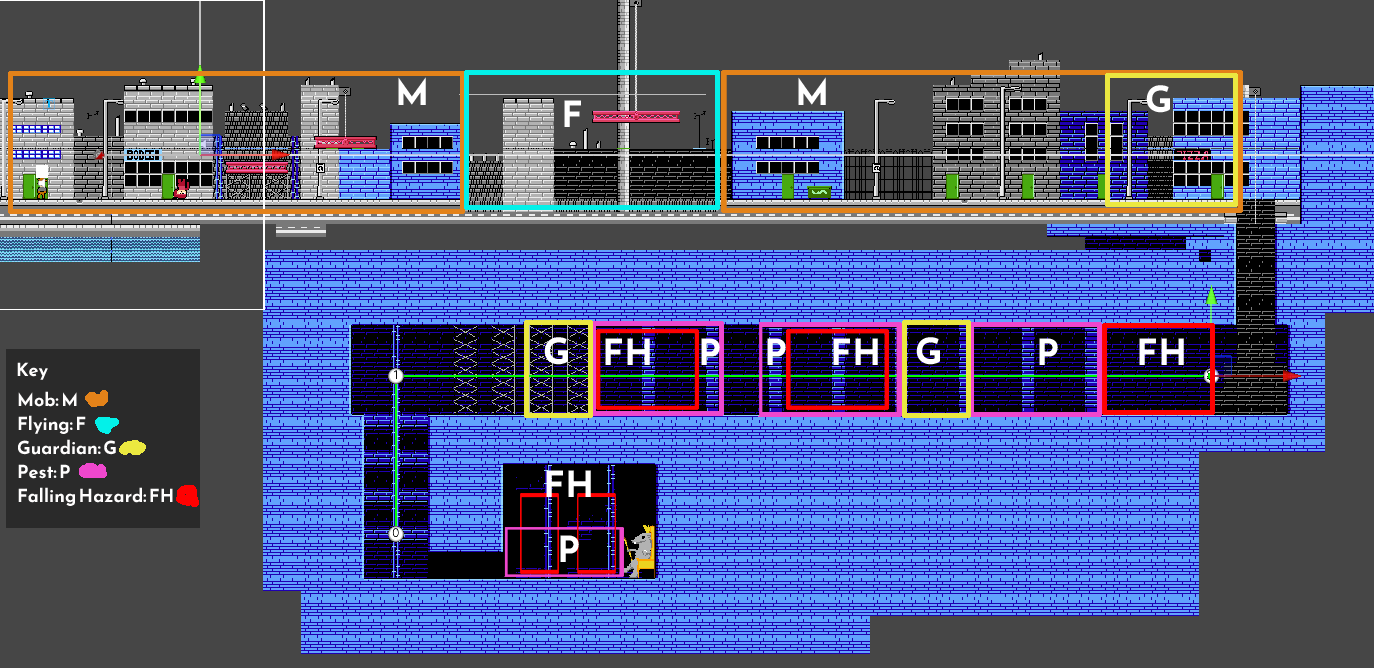
<style>
.page{position:relative;width:1374px;height:668px;background:#464646}
.page>*{position:absolute;margin:0}
.t1{font:36px "ReemKufi-Bold";color:#ffffff}
.t2{font:18px "ReemKufi-Bold";color:#fffefe}
.t3{font:18px/12px "ReemKufi-Bold";color:#fffefe}
.t4{font:18px/12px "ReemKufi-Bold";color:#ffffff}
</style>
<div class="page">
<p class="t1" style="left:398px;top:77px;width:28px;height:28px">M</p>
<p class="t1" style="left:798px;top:77px;width:28px;height:28px">M</p>
<p class="t1" style="left:1146px;top:85px;width:24px;height:28px">G</p>
<p class="t1" style="left:564px;top:100px;width:17px;height:27px">F</p>
<p class="t1" style="left:544px;top:337px;width:24px;height:28px">G</p>
<p class="t1" style="left:605px;top:338px;width:45px;height:27px">FH</p>
<p class="t1" style="left:701px;top:338px;width:19px;height:27px">P</p>
<p class="t1" style="left:767px;top:338px;width:19px;height:27px">P</p>
<p class="t1" style="left:833px;top:338px;width:45px;height:27px">FH</p>
<p class="t1" style="left:916px;top:337px;width:24px;height:28px">G</p>
<p class="t1" style="left:1039px;top:338px;width:19px;height:27px">P</p>
<p class="t1" style="left:1139px;top:338px;width:45px;height:27px">FH</p>
<p class="t2" style="left:17px;top:362px;width:31px;height:18px">Key</p>
<p class="t3" style="left:18px;top:391px;width:155px;height:115px">Mob: <span class="t4">M<br></span><br>Flying: F<br><br>Guardian: G<br><br>Pest: P<br><br>Falling Hazard: FH</p>
<p class="t1" style="left:546px;top:470px;width:45px;height:27px">FH</p>
<p class="t1" style="left:560px;top:535px;width:19px;height:27px">P</p>
</div>
